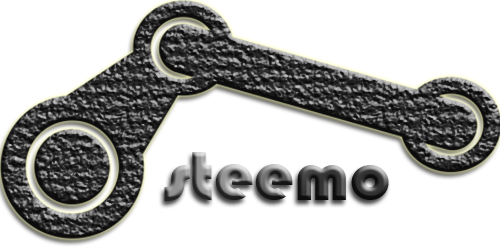
<style>
.page{position:relative;width:500px;height:249px;background:#ffffff}
.page>*{position:absolute;margin:0}
.t1{font:72px "Bauhaus93"}
</style>
<div class="page">
<p class="t1" style="left:164px;top:152px;width:225px;height:49px">steemo</p>
</div>
